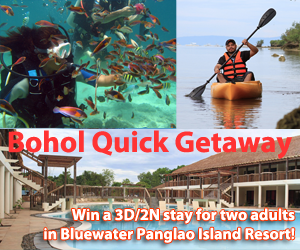
<style>
.page{position:relative;width:300px;height:250px}
.page>*{position:absolute;margin:0}
.t1{font:30px "MyriadPro-Bold";color:#ff3333}
.t2{font:16px "MyriadPro-Bold";color:#ffffff}
</style>
<div class="page">
<p class="t1" style="left:8px;top:130px;width:284px;height:29px">Bohol Quick Getaway</p>
<p class="t2" style="left:44px;top:208px;width:251px;height:35px;text-align:right">Win a 3D/2N stay for two adults<br>in Bluewater Panglao Island Resort!</p>
</div>
